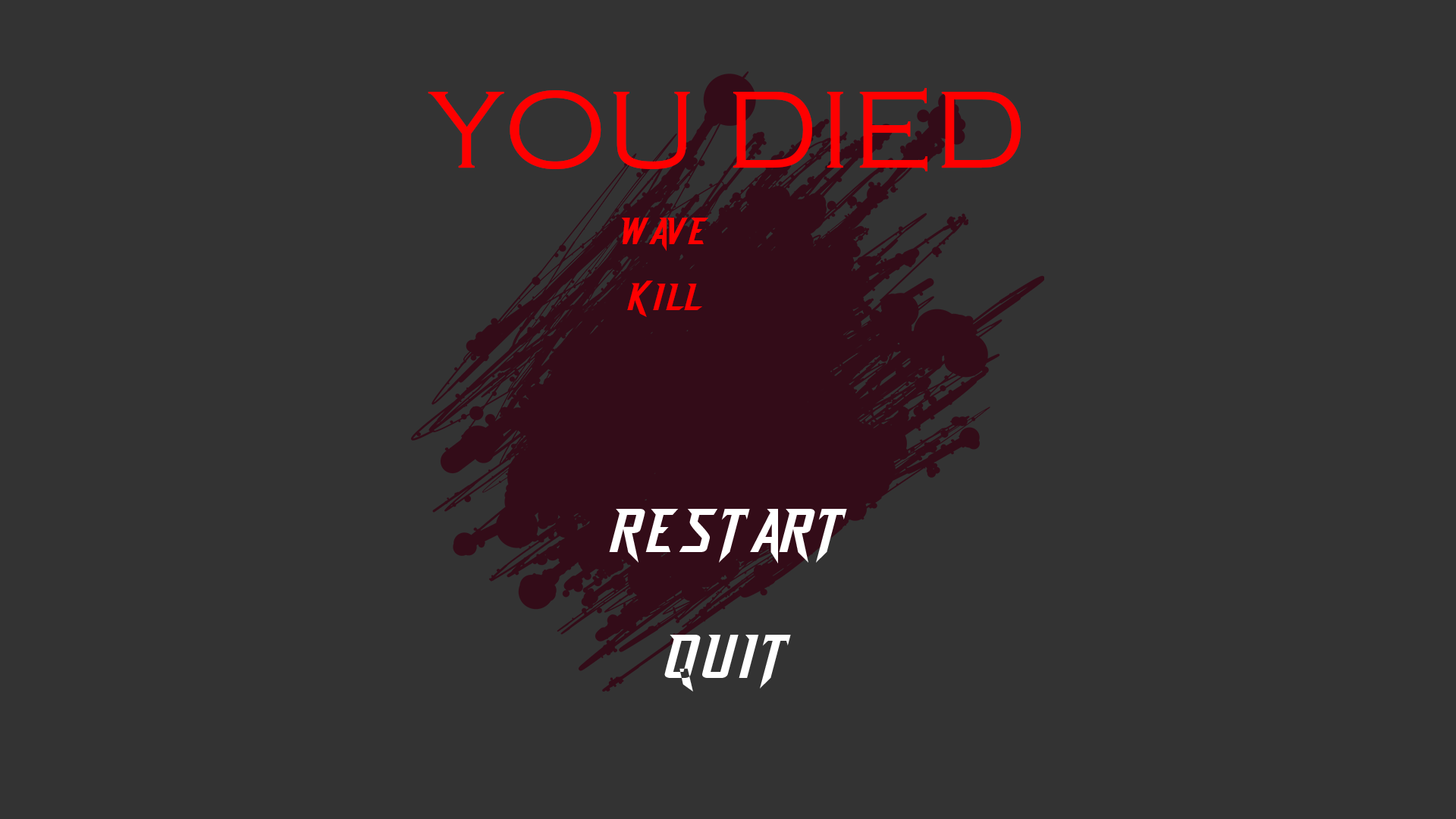
<style>
.page{position:relative;width:1456px;height:819px;background:#333333}
.page>*{position:absolute;margin:0}
.t1{font:113.7px "CopperplateGothic-Light";color:#ff0000}
.t2{font:37.9px "DashHorizon";color:#ff0000}
</style>
<div class="page">
<p class="t1" style="left:428px;top:88px;width:593px;height:83px">YOU DIED</p>
<p class="t2" style="left:621px;top:218px;width:87px;height:99px;text-align:center">WAVE :<br>KILL :</p>
</div>
